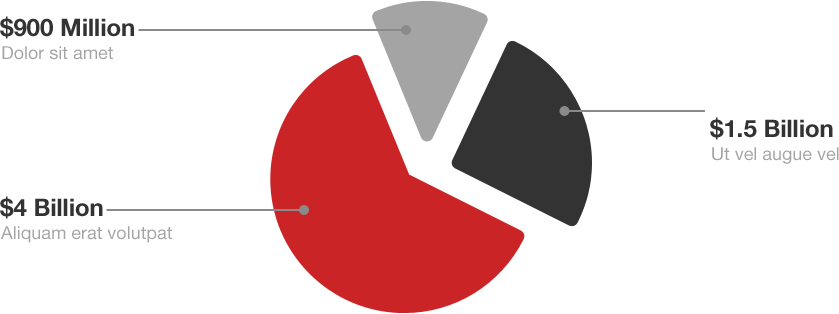
<style>
.page{position:relative;width:839px;height:314px;background:#ffffff}
.page>*{position:absolute;margin:0}
.t1{font:24px "HelveticaNeueLTPro-Bd";color:#333333}
.t2{font:18px "HelveticaNeueLTPro-Roman";color:#a4a4a4}
</style>
<div class="page">
<p class="t1" style="left:0px;top:16px;width:134px;height:23px">$900 Million</p>
<p class="t2" style="left:2px;top:46px;width:111px;height:14px">Dolor sit amet</p>
<p class="t1" style="left:710px;top:117px;width:123px;height:23px">$1.5 Billion</p>
<p class="t2" style="left:712px;top:147px;width:127px;height:17px">Ut vel augue vel</p>
<p class="t1" style="left:0px;top:196px;width:103px;height:23px">$4 Billion</p>
<p class="t2" style="left:0px;top:226px;width:172px;height:17px">Aliquam erat volutpat</p>
</div>
